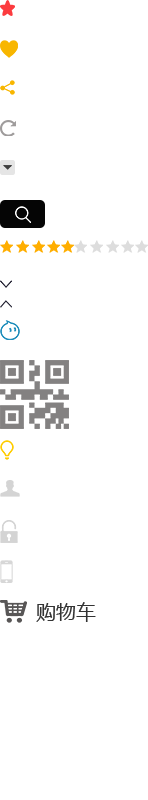
<style>
.page{position:relative;width:148px;height:800px;background:#ffffff}
.page>*{position:absolute;margin:0}
.t1{font:20px "MicrosoftYaHei";color:#333333}
</style>
<div class="page">
<p class="t1" style="left:36px;top:602px;width:60px;height:20px">购物车</p>
</div>
